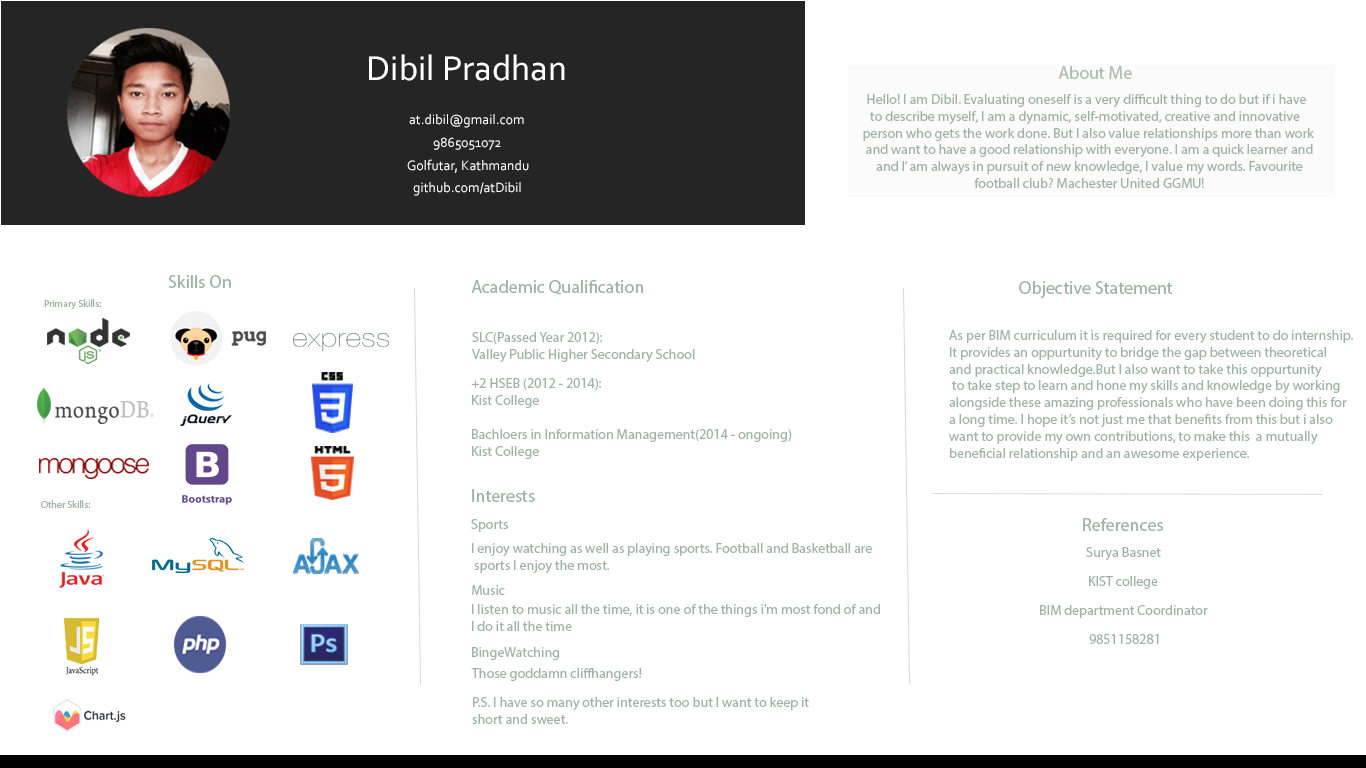
<style>
.page{position:relative;width:1366px;height:768px;background:#ffffff}
.page>*{position:absolute;margin:0}
.t1{font:36px "Corbel";color:#ffffff}
.t2{font:18px "MyriadPro-Regular";color:#9eb2a5}
.t3{font:14px "MyriadPro-Regular";color:#9eb2a5}
.t4{font:14px "Corbel";color:#fefffe}
.t5{font:10px "MyriadPro-Regular";color:#9eb2a5}
</style>
<div class="page">
<p class="t1" style="left:369px;top:54px;width:196px;height:27px">Dibil Pradhan</p>
<p class="t2" style="left:1058px;top:66px;width:74px;height:13px">About Me</p>
<p class="t3" style="left:863px;top:94px;width:451px;height:94px;text-align:center">Hello! I am Dibil. Evaluating oneself is a very difficult thing to do but if i have <br>to describe myself, I am a dynamic, self-motivated, creative and innovative  <br>person who gets the work done. But I also value relationships more than work<br> and want to have a good relationship with everyone. I am a quick learner and<br> and I’ am always in pursuit of new knowledge, I value my words. Favourite<br> football club? Machester United GGMU!</p>
<p class="t4" style="left:409px;top:114px;width:115px;height:14px">at.dibil@gmail.com</p>
<p class="t4" style="left:433px;top:137px;width:68px;height:13px">9865051072</p>
<p class="t4" style="left:407px;top:159px;width:122px;height:14px">Golfutar, Kathmandu</p>
<p class="t4" style="left:413px;top:182px;width:108px;height:14px">github.com/atDibil</p>
<p class="t2" style="left:168px;top:275px;width:63px;height:13px">Skills On</p>
<p class="t2" style="left:471px;top:280px;width:172px;height:15px">Academic Qualification</p>
<p class="t2" style="left:1019px;top:281px;width:154px;height:17px">Objective Statement</p>
<p class="t5" style="left:44px;top:299px;width:57px;height:11px">Primary Skills:</p>
<p class="t3" style="left:472px;top:332px;width:223px;height:30px">SLC(Passed Year 2012):<br>Valley Public Higher Secondary School</p>
<p class="t3" style="left:949px;top:330px;width:404px;height:131px">As per BIM curriculum it is required for every student to do internship.<br>It provides an oppurtunity to bridge the gap between theoretical <br>and practical knowledge.But I also want to take this oppurtunity<br> to take step to learn and hone my skills and knowledge by working <br>alongside these amazing professionals who have been doing this for <br>a long time. I hope it’s not just me that benefits from this but i also <br>want to provide my own contributions, to make this  a mutually <br>beneficial relationship and an awesome experience.</p>
<p class="t3" style="left:471px;top:378px;width:130px;height:30px">+2 HSEB (2012 - 2014):<br>Kist College</p>
<p class="t3" style="left:472px;top:429px;width:320px;height:30px">Bachloers in Information Management(2014 - ongoing)<br>Kist College</p>
<p class="t2" style="left:472px;top:489px;width:63px;height:13px">Interests</p>
<p class="t5" style="left:41px;top:500px;width:49px;height:8px">Other Skills:</p>
<p class="t3" style="left:471px;top:519px;width:37px;height:13px">Sports</p>
<p class="t2" style="left:1083px;top:518px;width:80px;height:13px">References</p>
<p class="t3" style="left:472px;top:543px;width:400px;height:31px">I enjoy watching as well as playing sports. Football and Basketball are<br> sports I enjoy the most.</p>
<p class="t3" style="left:1086px;top:547px;width:75px;height:14px">Surya Basnet</p>
<p class="t3" style="left:1089px;top:576px;width:69px;height:13px">KIST college</p>
<p class="t3" style="left:472px;top:585px;width:33px;height:10px">Music</p>
<p class="t3" style="left:472px;top:604px;width:408px;height:27px">I listen to music all the time, it is one of the things i'm most fond of and<br>I do it all the time</p>
<p class="t3" style="left:1040px;top:605px;width:168px;height:13px">BIM department Coordinator</p>
<p class="t3" style="left:1089px;top:634px;width:70px;height:10px">9851158281</p>
<p class="t3" style="left:472px;top:647px;width:87px;height:13px">BingeWatching</p>
<p class="t3" style="left:471px;top:668px;width:171px;height:13px">Those goddamn cliffhangers!</p>
<p class="t3" style="left:472px;top:697px;width:337px;height:27px">P.S. I have so many other interests too but I want to keep it <br>short and sweet.</p>
</div>
